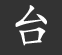
<style>
.page{position:relative;width:62px;height:55px;background:#333333}
.page>*{position:absolute;margin:0}
.t1{font:48px "KaiTi";letter-spacing:0.01em;color:#ffffff}
</style>
<div class="page">
<p class="t1" style="left:15px;top:5px;width:32px;height:41px">台</p>
</div>
